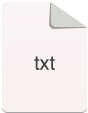
<style>
.page{position:relative;width:88px;height:113px}
.page>*{position:absolute;margin:0}
.t1{font:20px "Helvetica";color:#423f3f}
</style>
<div class="page">
<p class="t1" style="left:34px;top:56px;width:21px;height:14px">txt</p>
</div>
